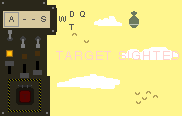
<style>
.page{position:relative;width:182px;height:116px;background:#fff68e}
.page>*{position:absolute;margin:0}
.t1{font:7.6px "ArialMT";letter-spacing:0.075em;color:#535353}
.t2{font:12.2px "Helvetica";letter-spacing:0.075em;color:#ffd3d0}
</style>
<div class="page">
<p class="t1" style="left:59px;top:16px;width:7px;height:6px">W</p>
<p class="t1" style="left:69px;top:24px;width:5px;height:6px">T</p>
<p class="t2" style="left:56px;top:51px;width:123px;height:9px">TARGET SIGHTED</p>
</div>
